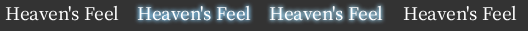
<style>
.page{position:relative;width:528px;height:31px;background:#333333}
.page>*{position:absolute;margin:0}
.t1{font:21px "OfficialFateFont-Medium";color:#ffffff}
</style>
<div class="page">
<p class="t1" style="left:5px;top:5px;width:114px;height:16px">Heaven's Feel</p>
<p class="t1" style="left:137px;top:5px;width:114px;height:16px">Heaven's Feel</p>
<p class="t1" style="left:269px;top:5px;width:114px;height:16px">Heaven's Feel</p>
<p class="t1" style="left:403px;top:5px;width:114px;height:16px">Heaven's Feel</p>
</div>
